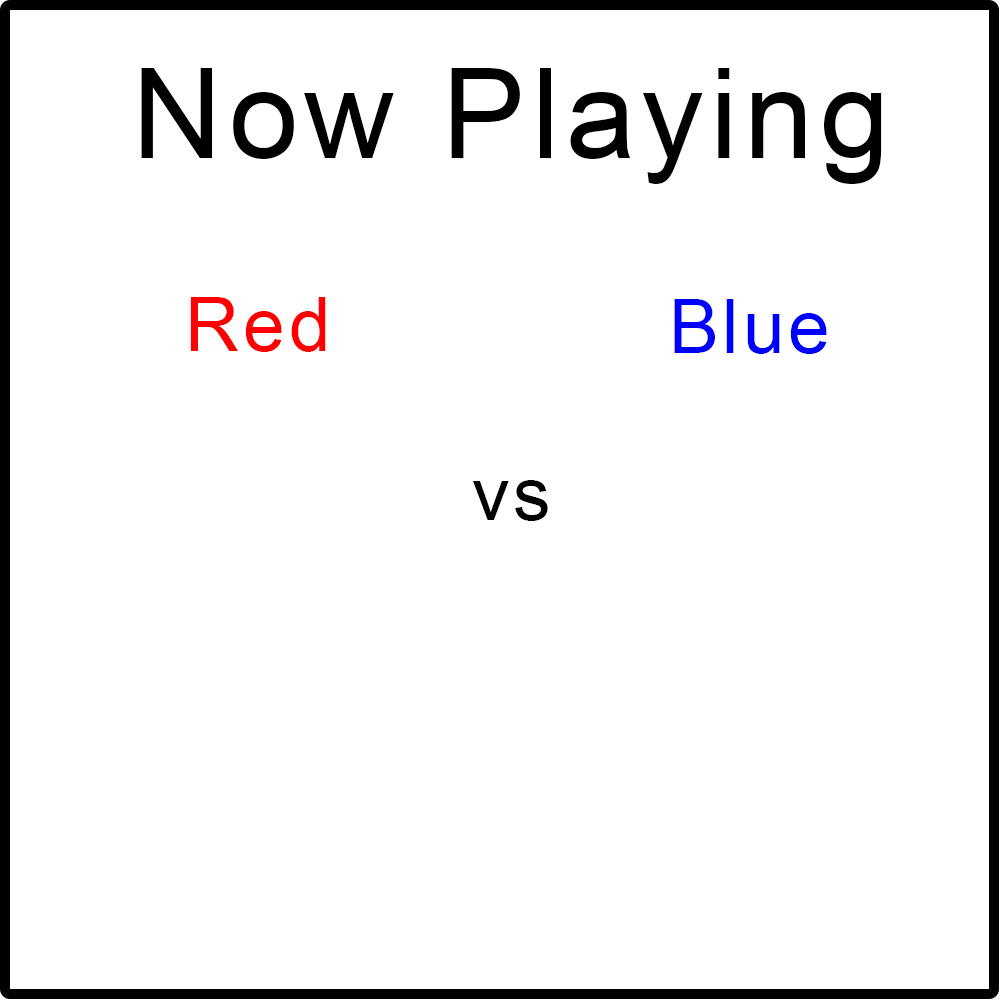
<style>
.page{position:relative;width:1000px;height:1000px;background:#ffffff}
.page>*{position:absolute;margin:0}
.t1{font:125px "ArialMT";letter-spacing:0.05em;color:#000000}
.t2{font:75px "ArialMT";letter-spacing:0.05em;color:#ff0000}
.t3{font:75px "ArialMT";letter-spacing:0.05em;color:#0000ff}
.t4{font:75px "ArialMT";letter-spacing:0.05em;color:#000000}
</style>
<div class="page">
<p class="t1" style="left:141px;top:68px;width:741px;height:116px">Now Playing</p>
<p class="t2" style="left:190px;top:297px;width:136px;height:55px">Red</p>
<p class="t3" style="left:674px;top:299px;width:153px;height:55px">Blue</p>
<p class="t4" style="left:473px;top:480px;width:75px;height:41px">vs</p>
</div>
